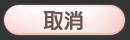
<style>
.page{position:relative;width:130px;height:40px;background:#333333}
.page>*{position:absolute;margin:0}
.t1{font:20px "AdobeFanHeitiStd-Bold";color:#705555;font-weight:bold}
</style>
<div class="page">
<p class="t1" style="left:43px;top:11px;width:40px;height:20px">取消</p>
</div>
